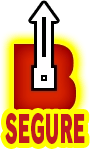
<style>
.page{position:relative;width:90px;height:150px}
.page>*{position:absolute;margin:0}
.t1{font:37.3px "RodinNTLGPro-UB";color:#c0191f;scale:0.48 1}
</style>
<div class="page">
<p class="t1" style="left:5px;top:113px;width:80px;height:31px">SEGURE</p>
</div>
